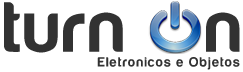
<style>
.page{position:relative;width:243px;height:72px;background:#ffffff}
.page>*{position:absolute;margin:0}
.t1{font:73.8px "Harabara-Bold";letter-spacing:0.05em;color:#323232}
.t2{font:13.8px "Harabara-Bold";letter-spacing:0.1em;color:#323232}
</style>
<div class="page">
<p class="t1" style="left:4px;top:2px;width:236px;height:51px">turn    n</p>
<p class="t2" style="left:97px;top:57px;width:143px;height:13px">Eletronicos e Objetos</p>
</div>
